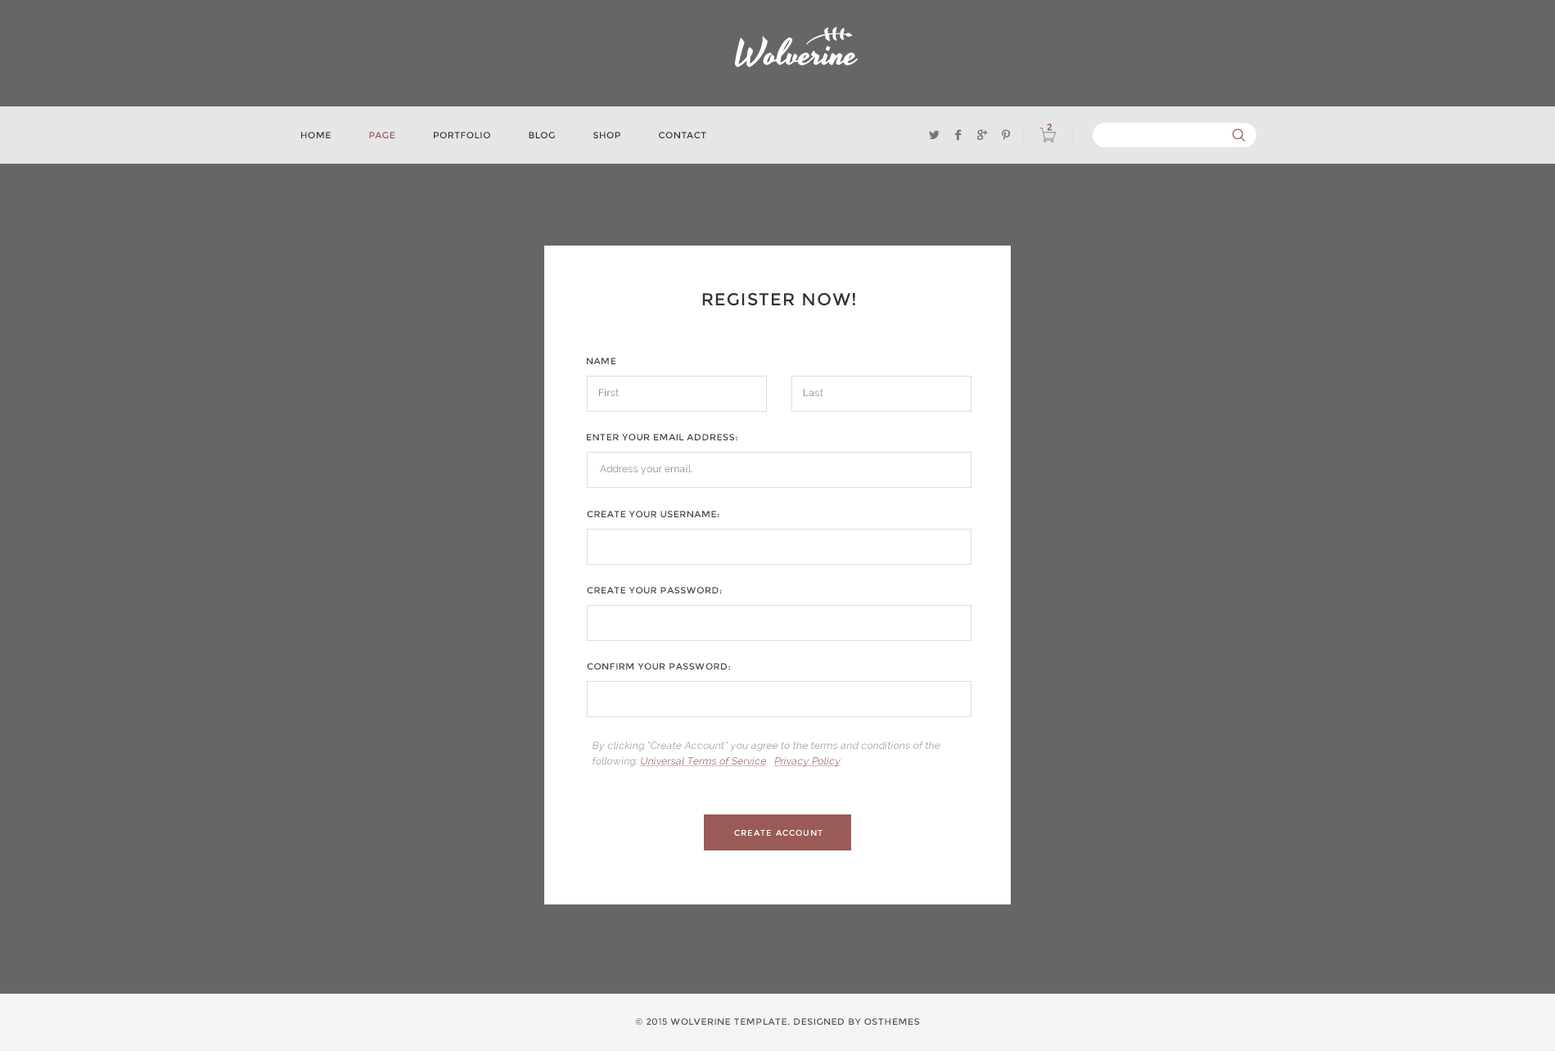
<style>
.page{position:relative;width:1555px;height:1051px;background:#666666}
.page>*{position:absolute;margin:0}
.t1{font:9px "Montserrat-Regular";color:#9a5a58;font-weight:bold}
.t2{font:9px "Montserrat-Regular";letter-spacing:0.05em;color:#333333}
.t3{font:9px "Montserrat-Regular";letter-spacing:0.05em;color:#9b5a57}
.t4{font:17.2px "Montserrat-Regular";letter-spacing:0.05em;color:#333333}
.t5{font:9px "Montserrat-Regular";letter-spacing:0.05em;color:#444444}
.t6{font:9.8px "Raleway";letter-spacing:0.02em;color:#888888}
.t7{font:9.8px/15.7px "Raleway";letter-spacing:0.02em;color:#999999;font-style:italic}
.t8{font:9.8px/15.7px "Raleway";letter-spacing:0.02em;color:#995958;font-style:italic;text-decoration:underline}
.t9{font:8.2px "Montserrat-Regular";letter-spacing:0.1em;color:#fafafa}
.t10{font:9px "Montserrat-Regular";letter-spacing:0.05em;color:#555555}
</style>
<div class="page">
<p class="t1" style="left:1046px;top:124px;width:6px;height:7px">2</p>
<p class="t2" style="left:301px;top:132px;width:405px;height:6px">HOME      <span class="t3">PAGE</span>      PORTFOLIO      BLOG      SHOP      CONTACT</p>
<p class="t4" style="left:702px;top:293px;width:153px;height:13px">REGISTER NOW!</p>
<p class="t5" style="left:587px;top:358px;width:29px;height:6px">NAME</p>
<p class="t6" style="left:599px;top:389px;width:20px;height:7px">First</p>
<p class="t6" style="left:803px;top:389px;width:20px;height:7px">Last</p>
<p class="t5" style="left:587px;top:434px;width:150px;height:6px">ENTER YOUR EMAIL ADDRESS:</p>
<p class="t6" style="left:600px;top:465px;width:92px;height:10px">Address your email.</p>
<p class="t5" style="left:587px;top:511px;width:132px;height:6px">CREATE YOUR USERNAME:</p>
<p class="t5" style="left:587px;top:587px;width:135px;height:6px">CREATE YOUR PASSWORD:</p>
<p class="t5" style="left:587px;top:663px;width:143px;height:6px">CONFIRM YOUR PASSWORD:</p>
<p class="t7" style="left:592px;top:741px;width:348px;height:26px">By clicking “Create Account” you agree to the terms and conditions of the following: <span class="t8">Universal Terms of Service   Privacy Policy</span></p>
<p class="t9" style="left:734px;top:829px;width:88px;height:6px">CREATE ACCOUNT</p>
<p class="t10" style="left:635px;top:1018px;width:285px;height:7px">© 2015 WOLVERINE TEMPLATE. DESIGNED BY OSTHEMES</p>
</div>
